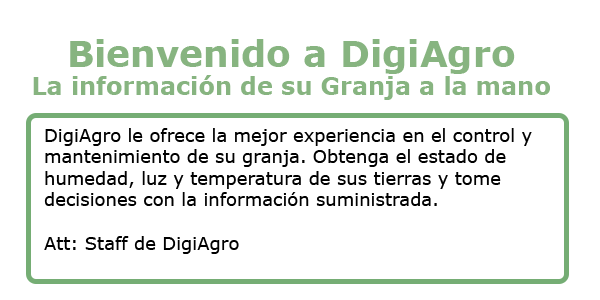
<style>
.page{position:relative;width:600px;height:300px;background:#ffffff}
.page>*{position:absolute;margin:0}
.t1{font:36px "Verdana-Bold";color:#87b480}
.t2{font:24px "Verdana-Bold";color:#87b480}
.t3{font:18px "Verdana";color:#000000}
</style>
<div class="page">
<p class="t1" style="left:70px;top:39px;width:445px;height:35px">Bienvenido a DigiAgro</p>
<p class="t2" style="left:33px;top:75px;width:517px;height:25px">La información de su Granja a la mano</p>
<p class="t3" style="left:44px;top:128px;width:488px;height:126px">DigiAgro le ofrece la mejor experiencia en el control y mantenimiento de su granja. Obtenga el estado de <br>humedad, luz y temperatura de sus tierras y tome <br>decisiones con la información suministrada.<br><br>Att: Staff de DigiAgro</p>
</div>
